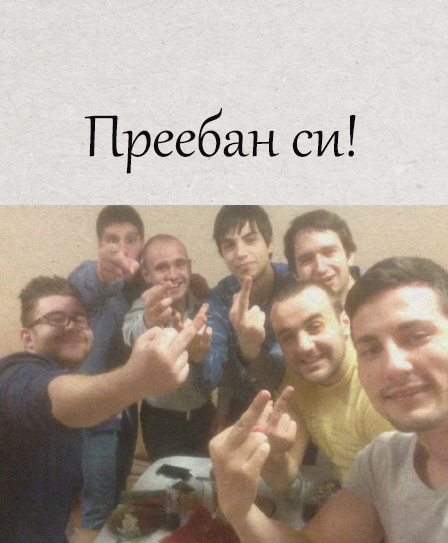
<style>
.page{position:relative;width:448px;height:543px}
.page>*{position:absolute;margin:0}
.t1{font:72px "Gabriola";color:#0e0e0e}
</style>
<div class="page">
<p class="t1" style="left:84px;top:108px;width:272px;height:66px">Преебан си!</p>
</div>
